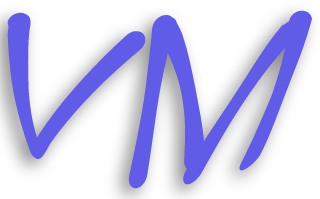
<style>
.page{position:relative;width:320px;height:199px;background:#ffffff}
.page>*{position:absolute;margin:0}
.t1{font:225.1px "!PaulMaul-Bold";color:#605ce8;scale:0.95 1}
</style>
<div class="page">
<p class="t1" style="left:7px;top:10px;width:305px;height:179px;rotate:1deg">VM</p>
</div>
